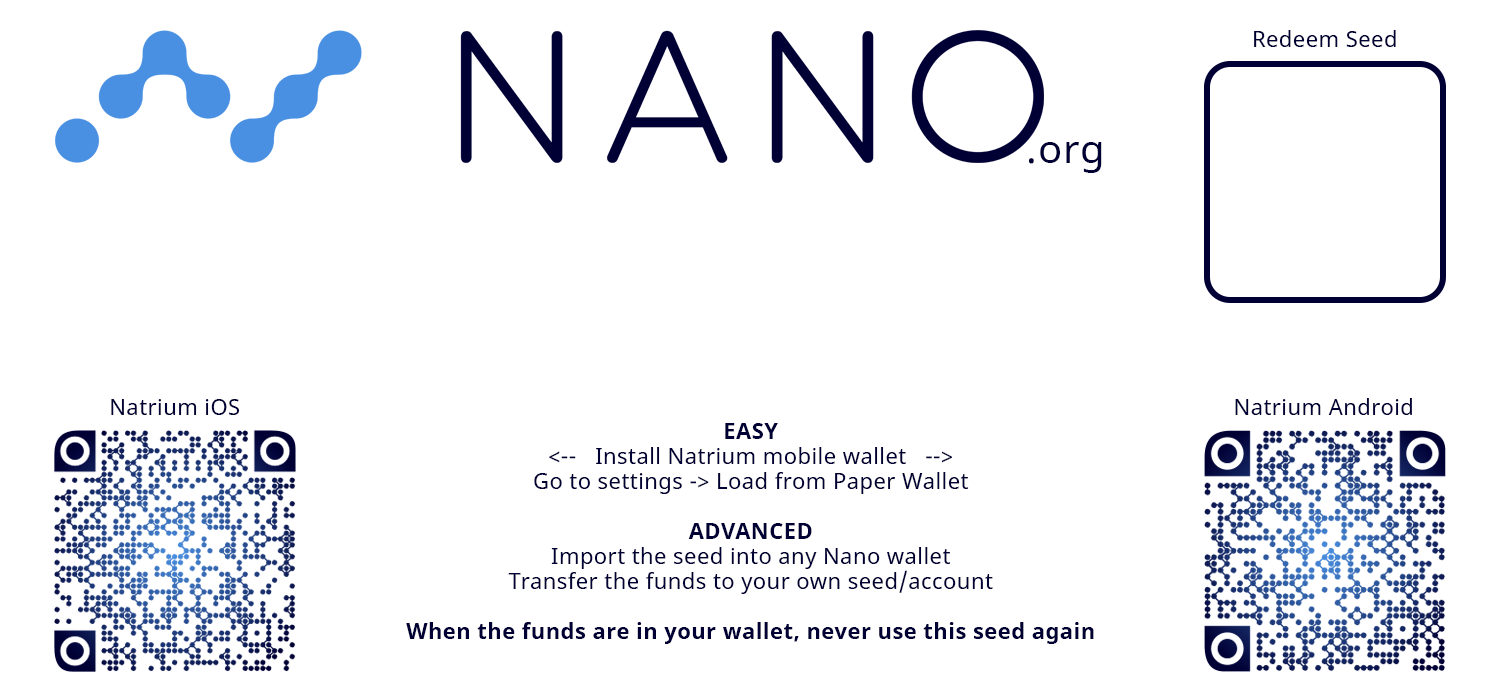
<style>
.page{position:relative;width:1500px;height:700px;background:#ffffff}
.page>*{position:absolute;margin:0}
.t1{font:22px "NotoSans";letter-spacing:0.02em;color:#000034}
.t2{font:40px "NotoSans";letter-spacing:0.02em;color:#000034}
.t3{font:22px/25px "NotoSans";letter-spacing:0.02em;color:#000034}
.t4{font:22px/25px "NotoSans-Bold";letter-spacing:0.02em;color:#000034}
</style>
<div class="page">
<p class="t1" style="left:1254px;top:30px;width:142px;height:17px">Redeem Seed</p>
<p class="t2" style="left:1028px;top:142px;width:74px;height:31px">.org</p>
<p class="t1" style="left:111px;top:399px;width:129px;height:16px">Natrium iOS</p>
<p class="t1" style="left:1235px;top:398px;width:177px;height:17px">Natrium Android</p>
<p class="t3" style="left:406px;top:423px;width:688px;height:221px;text-align:center"><span class="t4">EASY<br></span>&lt;--   Install Natrium mobile wallet   --&gt;<br>Go to settings -&gt; Load from Paper Wallet<br><br><span class="t4">ADVANCED<br></span>Import the seed into any Nano wallet<br>Transfer the funds to your own seed/account<br><br><span class="t4">When the funds are in your wallet, never use this seed again</span></p>
</div>
